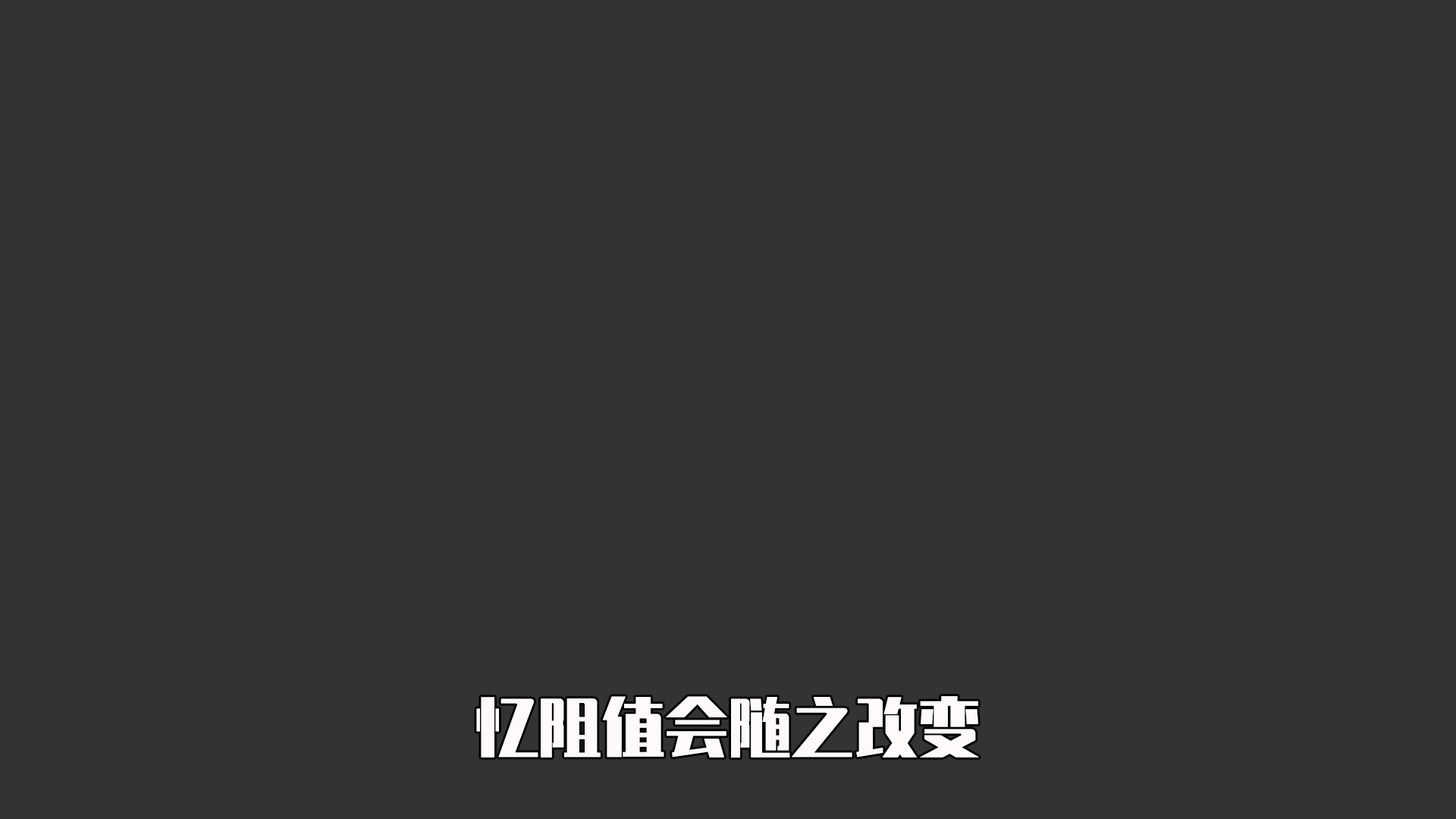
<style>
.page{position:relative;width:1456px;height:819px;background:#333333}
.page>*{position:absolute;margin:0}
.t1{font:63.2px "ZhenyanGB-Regular";color:#fefafa}
</style>
<div class="page">
<p class="t1" style="left:476px;top:696px;width:503px;height:62px">忆阻值会随之改变</p>
</div>
